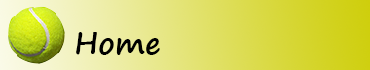
<style>
.page{position:relative;width:370px;height:70px}
.page>*{position:absolute;margin:0}
.t1{font:30px "SegoePrint-Bold";color:#000000}
</style>
<div class="page">
<p class="t1" style="left:76px;top:32px;width:84px;height:23px">Home</p>
</div>
